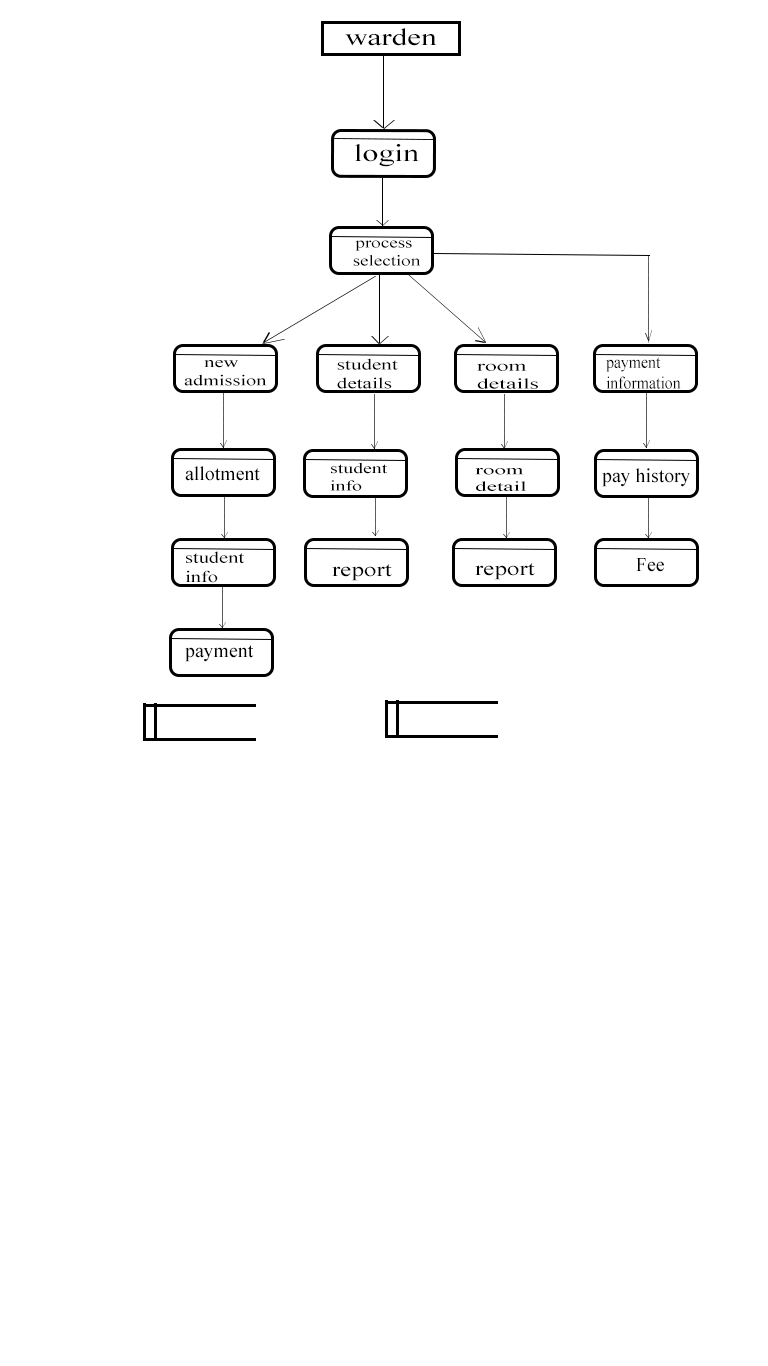
<style>
.page{position:relative;width:768px;height:1366px;background:#ffffff}
.page>*{position:absolute;margin:0}
.t1{font:24px "TimesNewRomanPSMT";color:#000000;scale:1.3 1}
.t2{font:24.5px "TimesNewRomanPSMT";color:#000000;scale:1.3 1}
.t3{font:15px "TimesNewRomanPSMT";color:#000000;scale:1.27 1}
.t4{font:15.1px "TimesNewRomanPSMT";color:#000000;scale:1.34 1}
.t5{font:15.6px "TimesNewRomanPSMT";color:#000000;scale:1.35 1}
.t6{font:14.8px "TimesNewRomanPSMT";color:#000000;scale:1.6 1}
.t7{font:17.3px "TimesNewRomanPSMT";color:#000000;scale:0.91 1}
.t8{font:14.5px "TimesNewRomanPSMT";color:#000000;scale:1.37 1}
.t9{font:19.8px "TimesNewRomanPSMT";color:#000000}
.t10{font:13.8px "TimesNewRomanPSMT";color:#000000;scale:1.66 1}
.t11{font:16px "TimesNewRomanPSMT";color:#000000;scale:1.28 1}
.t12{font:19.8px "TimesNewRomanPSMT";color:#000000;scale:1.26 1}
</style>
<div class="page">
<p class="t1" style="left:345px;top:28px;width:92px;height:18px">warden</p>
<p class="t2" style="left:355px;top:144px;width:64px;height:23px">login</p>
<p class="t3" style="left:353px;top:240px;width:68px;height:26px">process selection</p>
<p class="t4" style="left:184px;top:360px;width:83px;height:26px">new <br>admission</p>
<p class="t5" style="left:337px;top:358px;width:61px;height:31px">student <br>details</p>
<p class="t6" style="left:477px;top:363px;width:61px;height:26px">room<br>details</p>
<p class="t7" style="left:606px;top:357px;width:75px;height:32px">payment<br>information</p>
<p class="t8" style="left:330px;top:462px;width:58px;height:29px">student<br>info</p>
<p class="t9" style="left:185px;top:466px;width:75px;height:15px">allotment</p>
<p class="t10" style="left:475px;top:468px;width:51px;height:23px">room<br>detail</p>
<p class="t9" style="left:602px;top:468px;width:88px;height:19px">pay history</p>
<p class="t11" style="left:186px;top:551px;width:59px;height:32px">student <br>info</p>
<p class="t9" style="left:636px;top:558px;width:28px;height:14px">Fee</p>
<p class="t12" style="left:332px;top:564px;width:60px;height:17px">report</p>
<p class="t12" style="left:475px;top:563px;width:60px;height:17px">report</p>
<p class="t9" style="left:185px;top:645px;width:69px;height:17px">payment</p>
</div>
